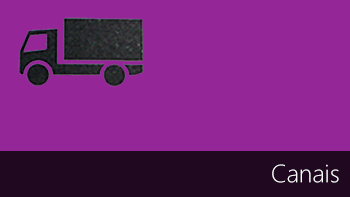
<style>
.page{position:relative;width:350px;height:197px;background:#942698}
.page>*{position:absolute;margin:0}
.t1{font:25px "SegoeUI-Light";color:#fefefe}
</style>
<div class="page">
<p class="t1" style="left:272px;top:164px;width:67px;height:19px">Canais</p>
</div>
